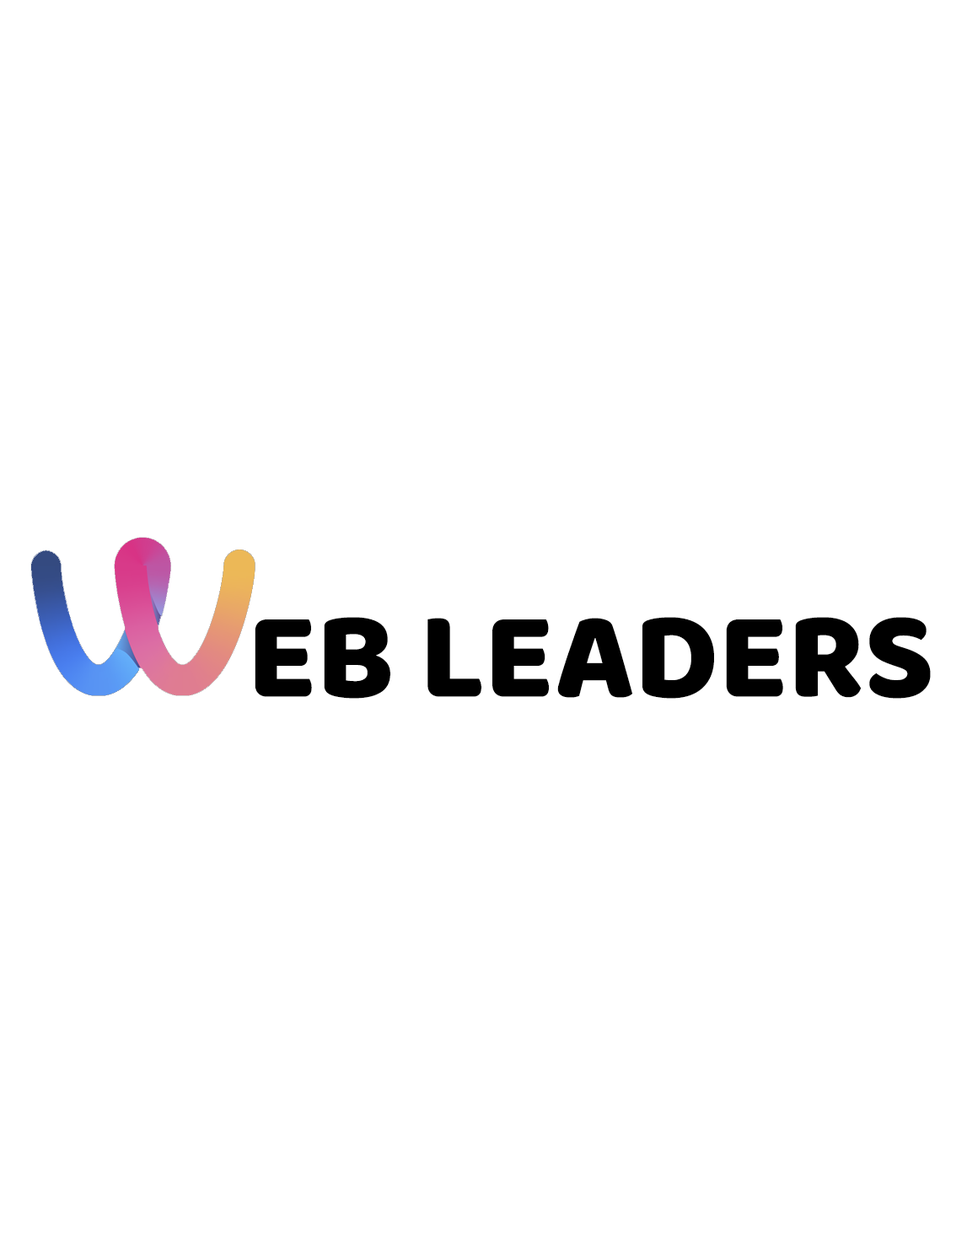
<style>
.page{position:relative;width:967px;height:1233px;background:#ffffff}
.page>*{position:absolute;margin:0}
.t1{font:126.4px "Baloo-Regular";color:#000000;text-transform:uppercase}
</style>
<div class="page">
<p class="t1" style="left:255px;top:617px;width:676px;height:82px">EB lEADERS</p>
</div>
